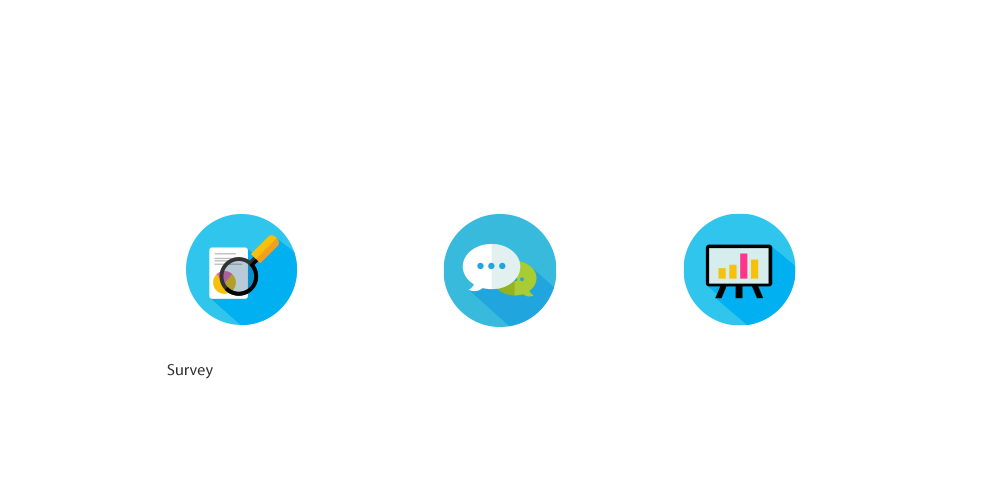
<style>
.page{position:relative;width:1000px;height:500px;background:#ffffff}
.page>*{position:absolute;margin:0}
.t1{font:16px "MyriadPro-Regular";letter-spacing:0.01em;color:#323232}
</style>
<div class="page">
<p class="t1" style="left:167px;top:364px;width:46px;height:15px">Survey</p>
</div>
